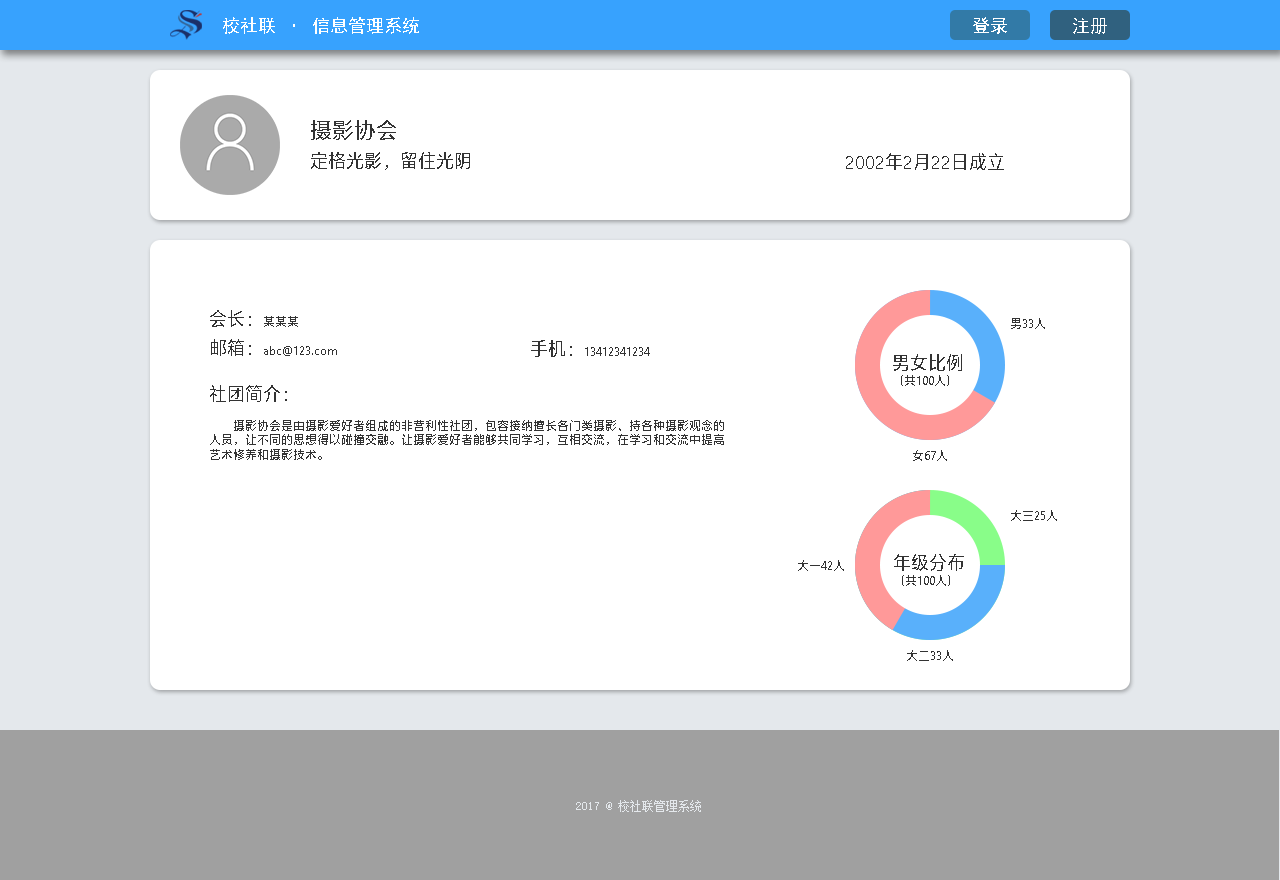
<style>
.page{position:relative;width:1280px;height:880px;background:#ffffff}
.page>*{position:absolute;margin:0}
.t1{font:18px "SimHei";color:#ffffff}
.t2{font:22px "MicrosoftYaHei";color:#333333}
.t3{font:18px "MicrosoftYaHei";color:#333333}
.t4{font:12px "MicrosoftYaHei";color:#333333}
.t5{font:12px "SimSun";color:#e4e8ec}
</style>
<div class="page">
<p class="t1" style="left:223px;top:17px;width:196px;height:17px">校社联 · 信息管理系统</p>
<p class="t1" style="left:973px;top:17px;width:34px;height:17px">登录</p>
<p class="t1" style="left:1073px;top:18px;width:34px;height:16px">注册</p>
<p class="t2" style="left:311px;top:120px;width:85px;height:20px">摄影协会</p>
<p class="t3" style="left:311px;top:152px;width:159px;height:18px">定格光影，留住光阴</p>
<p class="t3" style="left:846px;top:153px;width:158px;height:17px">2002年2月22日成立</p>
<p class="t3" style="left:210px;top:310px;width:88px;height:17px">会长：<span class="t4">某某某</span></p>
<p class="t4" style="left:1011px;top:318px;width:34px;height:11px">男33人</p>
<p class="t4" style="left:211px;top:339px;width:126px;height:17px"><span class="t3">邮箱：</span>abc@123.com</p>
<p class="t4" style="left:531px;top:340px;width:119px;height:17px"><span class="t3">手机：</span>13412341234</p>
<p class="t4" style="left:893px;top:354px;width:69px;height:32px"><span class="t3">男女比例<br></span>（共100人）</p>
<p class="t4" style="left:210px;top:385px;width:514px;height:75px"><span class="t3">社团简介：<br></span><br>        摄影协会是由摄影爱好者组成的非营利性社团，包容接纳擅长各门类摄影、持各种摄影观念的<br>人员，让不同的思想得以碰撞交融。让摄影爱好者能够共同学习，互相交流，在学习和交流中提高<br>艺术修养和摄影技术。</p>
<p class="t4" style="left:913px;top:450px;width:34px;height:11px">女67人</p>
<p class="t4" style="left:1011px;top:510px;width:46px;height:11px">大三25人</p>
<p class="t4" style="left:894px;top:554px;width:70px;height:32px"><span class="t3">年级分布<br></span>（共100人）</p>
<p class="t4" style="left:798px;top:560px;width:46px;height:11px">大一42人</p>
<p class="t4" style="left:907px;top:650px;width:46px;height:11px">大二33人</p>
<p class="t5" style="left:576px;top:800px;width:125px;height:12px">2017 @ 校社联管理系统</p>
</div>
